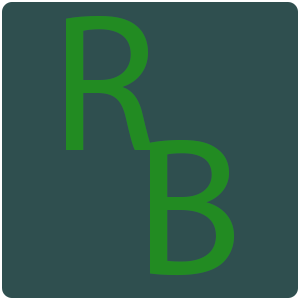
<style>
.page{position:relative;width:300px;height:300px;background:#2f4f4f}
.page>*{position:absolute;margin:0}
.t1{font:196.9px "MyriadPro-Regular";color:#228b22}
</style>
<div class="page">
<p class="t1" style="left:66px;top:16px;width:87px;height:134px">R</p>
<p class="t1" style="left:150px;top:140px;width:84px;height:136px">B</p>
</div>
